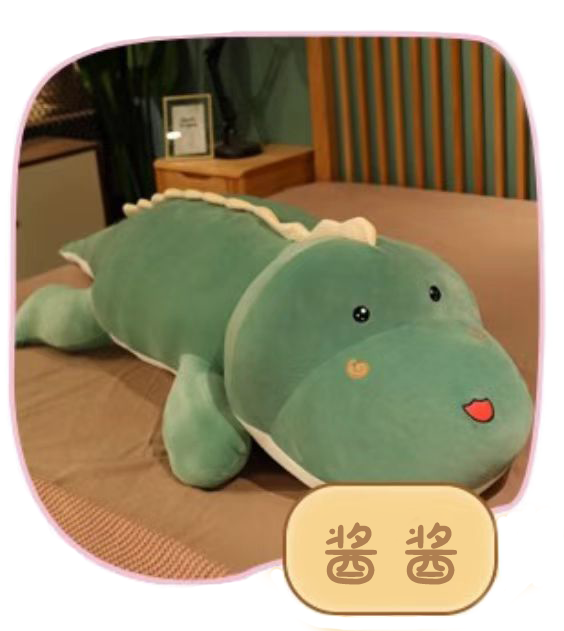
<style>
.page{position:relative;width:564px;height:631px}
.page>*{position:absolute;margin:0}
.t1{font:80px "QTxiaotu";color:#af7f51}
</style>
<div class="page">
<p class="t1" style="left:325px;top:522px;width:132px;height:63px">酱酱</p>
</div>
